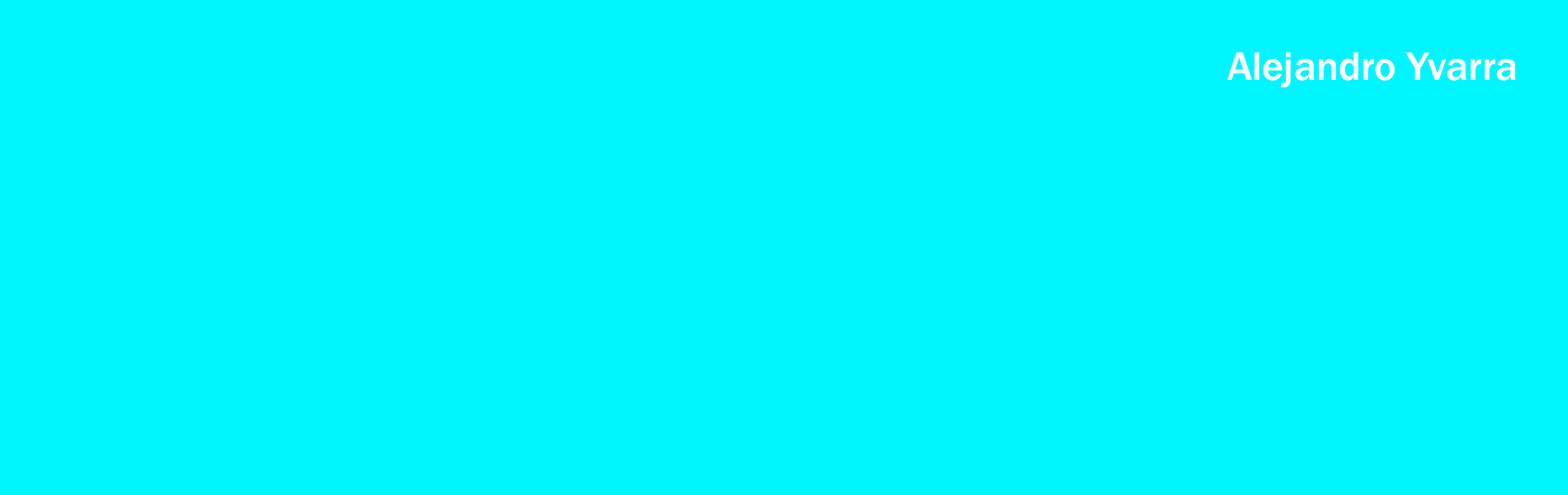
<style>
.page{position:relative;width:1568px;height:495px;background:#00f6ff}
.page>*{position:absolute;margin:0}
.t1{font:41.3px "FranklinGothic-Medium";color:#ffffff}
</style>
<div class="page">
<p class="t1" style="left:1227px;top:52px;width:289px;height:35px">Alejandro Yvarra</p>
</div>
